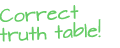
<style>
.page{position:relative;width:120px;height:48px;background:#ffffff}
.page>*{position:absolute;margin:0}
.t1{font:16px "ArchitectsDaughter";color:#66cc66}
</style>
<div class="page">
<p class="t1" style="left:0px;top:5px;width:101px;height:37px">Correct<br>truth table!</p>
</div>
